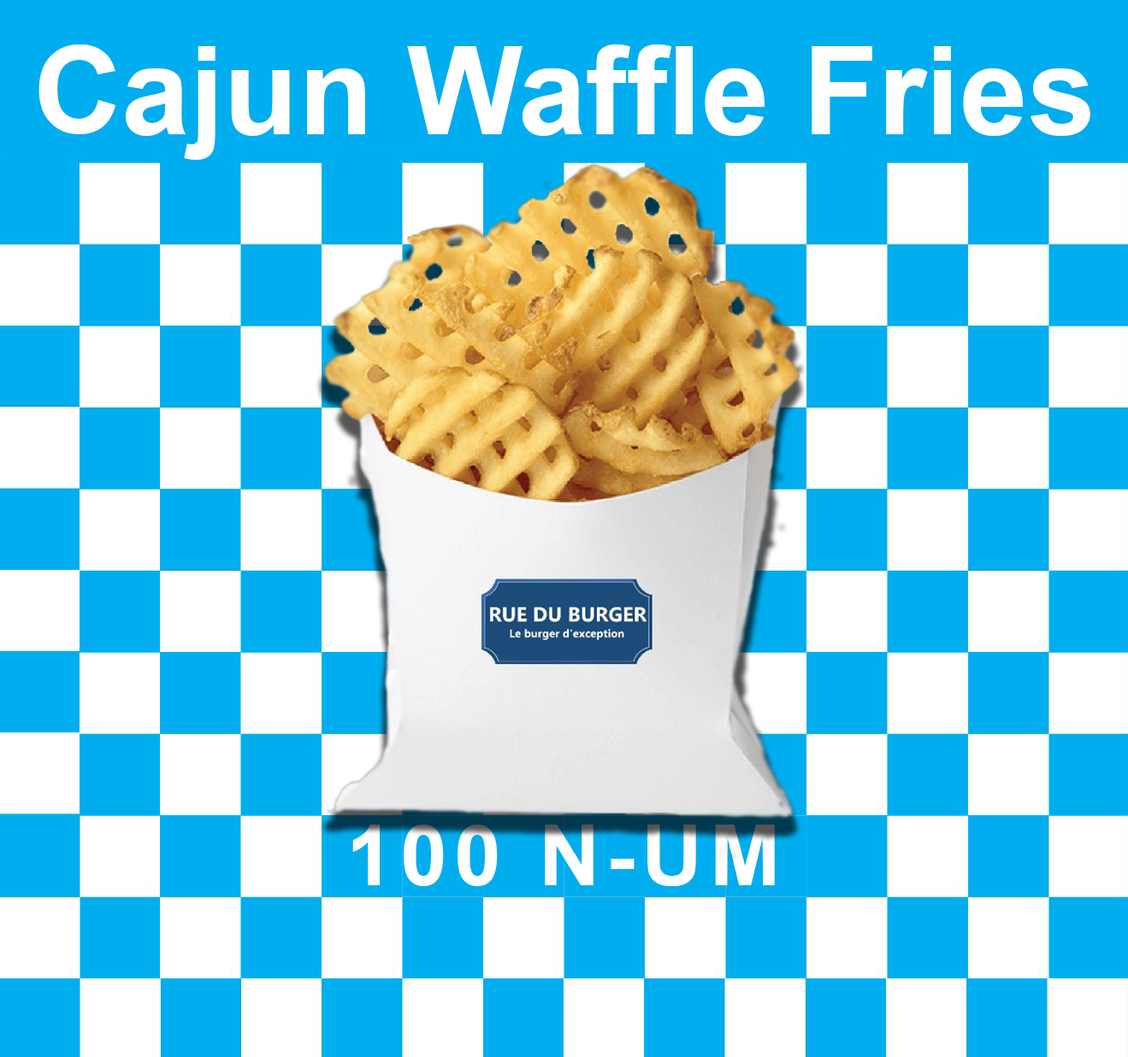
<style>
.page{position:relative;width:1128px;height:1057px;background:#00adef}
.page>*{position:absolute;margin:0}
.t1{font:122.2px "Arial-BoldMT";color:#ffffff}
.t2{font:84.6px "Arial-BoldMT";letter-spacing:0.08em;color:#ffffff}
</style>
<div class="page">
<p class="t1" style="left:38px;top:44px;width:1052px;height:116px">Cajun Waffle Fries</p>
<p class="t2" style="left:352px;top:825px;width:423px;height:62px">100 N-UM</p>
</div>
